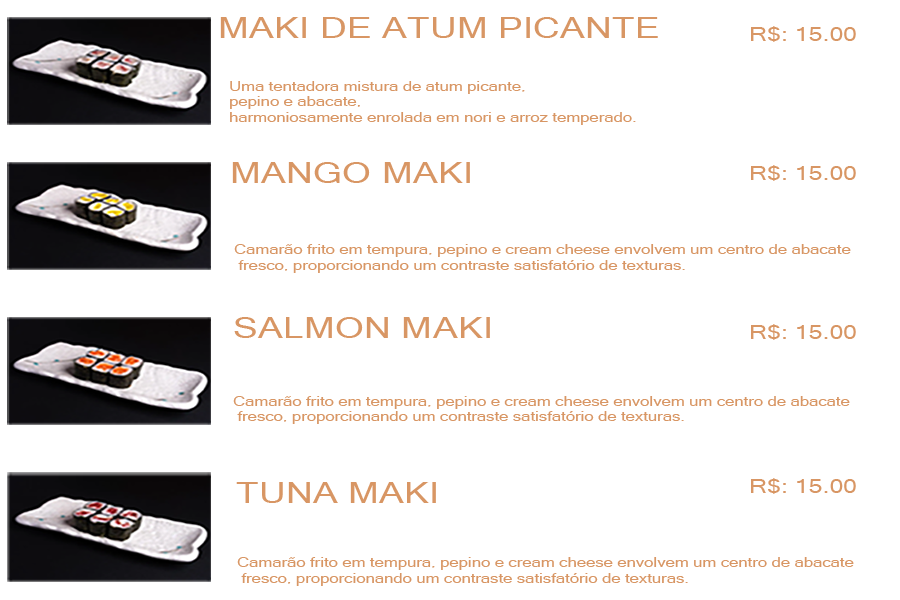
<style>
.page{position:relative;width:900px;height:600px;background:#ffffff}
.page>*{position:absolute;margin:0}
.t1{font:29.2px "MicrosoftSansSerif";color:#d89664;scale:1.29 1}
.t2{font:19.4px "MicrosoftSansSerif";color:#d89664;scale:1.29 1}
.t3{font:13px "MicrosoftSansSerif";color:#d89664;scale:1.29 1}
</style>
<div class="page">
<p class="t1" style="left:220px;top:17px;width:438px;height:21px">MAKI DE ATUM PICANTE</p>
<p class="t2" style="left:751px;top:26px;width:105px;height:16px">R$: 15.00</p>
<p class="t3" style="left:230px;top:81px;width:406px;height:44px">Uma tentadora mistura de atum picante, <br>pepino e abacate, <br>harmoniosamente enrolada em nori e arroz temperado.</p>
<p class="t1" style="left:232px;top:162px;width:238px;height:21px">MANGO MAKI</p>
<p class="t2" style="left:751px;top:165px;width:105px;height:16px">R$: 15.00</p>
<p class="t3" style="left:234px;top:244px;width:617px;height:29px">Camarão frito em tempura, pepino e cream cheese envolvem um centro de abacate<br> fresco, proporcionando um contraste satisfatório de texturas.</p>
<p class="t1" style="left:234px;top:317px;width:256px;height:21px">SALMON MAKI</p>
<p class="t2" style="left:751px;top:324px;width:105px;height:16px">R$: 15.00</p>
<p class="t3" style="left:233px;top:396px;width:617px;height:28px">Camarão frito em tempura, pepino e cream cheese envolvem um centro de abacate<br> fresco, proporcionando um contraste satisfatório de texturas.</p>
<p class="t1" style="left:236px;top:482px;width:200px;height:21px">TUNA MAKI</p>
<p class="t2" style="left:751px;top:478px;width:105px;height:16px">R$: 15.00</p>
<p class="t3" style="left:237px;top:557px;width:617px;height:29px">Camarão frito em tempura, pepino e cream cheese envolvem um centro de abacate<br> fresco, proporcionando um contraste satisfatório de texturas.</p>
</div>
